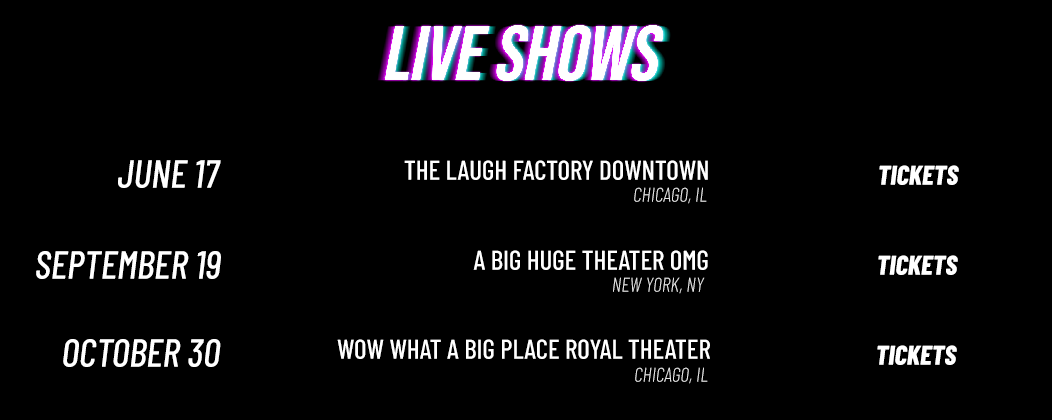
<style>
.page{position:relative;width:1052px;height:420px;background:#000000}
.page>*{position:absolute;margin:0}
.t1{font:39px "BarlowCondensed-MediumItalic";color:#ffffff}
.t2{font:27px "BarlowCondensed-Medium";color:#ffffff}
.t3{font:27px "BarlowCondensed-ExtraBoldItalic";color:#ffffff}
.t4{font:20px "BarlowCondensed-LightItalic";color:#e3e3e3}
</style>
<div class="page">
<p class="t1" style="left:118px;top:160px;width:103px;height:28px">JUNE 17</p>
<p class="t2" style="left:404px;top:160px;width:304px;height:20px">THE LAUGH FACTORY DOWNTOWN</p>
<p class="t3" style="left:879px;top:165px;width:80px;height:20px">TICKETS</p>
<p class="t4" style="left:634px;top:187px;width:73px;height:17px">CHICAGO, IL</p>
<p class="t1" style="left:36px;top:251px;width:185px;height:28px">SEPTEMBER 19</p>
<p class="t2" style="left:473px;top:250px;width:235px;height:20px">A BIG HUGE THEATER OMG</p>
<p class="t3" style="left:878px;top:255px;width:80px;height:20px">TICKETS</p>
<p class="t4" style="left:613px;top:277px;width:92px;height:17px">NEW YORK, NY</p>
<p class="t1" style="left:63px;top:339px;width:158px;height:28px">OCTOBER 30</p>
<p class="t2" style="left:337px;top:339px;width:373px;height:20px">WOW WHAT A BIG PLACE ROYAL THEATER</p>
<p class="t3" style="left:877px;top:345px;width:80px;height:20px">TICKETS</p>
<p class="t4" style="left:635px;top:367px;width:73px;height:17px">CHICAGO, IL</p>
</div>
